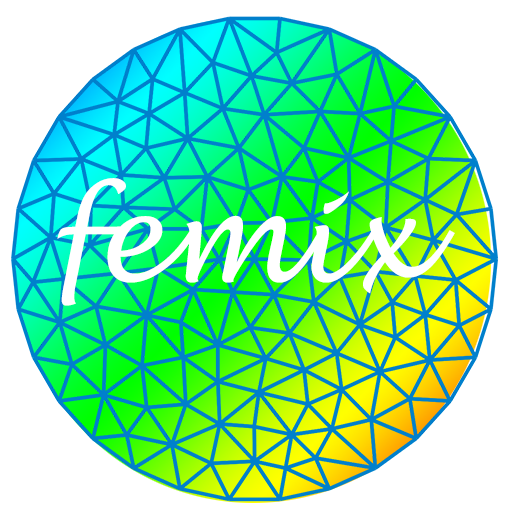
<style>
.page{position:relative;width:512px;height:512px;background:#ffffff}
.page>*{position:absolute;margin:0}
.t1{font:120px "LucidaHandwriting-Italic";color:#ffffff}
</style>
<div class="page">
<p class="t1" style="left:57px;top:178px;width:398px;height:128px">femix</p>
</div>
